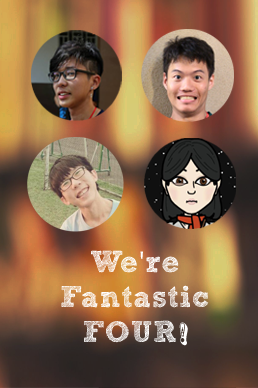
<style>
.page{position:relative;width:258px;height:388px}
.page>*{position:absolute;margin:0}
.t1{font:30px/35px "freeversionSketchBlock-Bold";letter-spacing:0.036em;color:#ffffff}
.t2{font:30px/35px "MyriadPro-Regular";letter-spacing:0.036em;color:#ffffff}
.t3{font:30px/35px "RosewoodStd-Regular";letter-spacing:0.036em;color:#ffffff}
</style>
<div class="page">
<p class="t1" style="left:61px;top:250px;width:148px;height:96px;text-align:center">We<span class="t2">'</span>re<br>Fantastic<br>FOUR<span class="t3">!</span></p>
</div>
